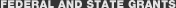
<style>
.page{position:relative;width:176px;height:8px;background:#e5e4e4}
.page>*{position:absolute;margin:0}
.t1{font:11px "HelveticaNeueLT-Black";color:#e5e4e4}
</style>
<div class="page">
<p class="t1" style="left:1px;top:0px;width:175px;height:9px">FEDERAL AND STATE GRANTS</p>
</div>
